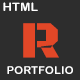
<style>
.page{position:relative;width:80px;height:80px;background:#2d2d2d}
.page>*{position:absolute;margin:0}
.t1{font:11.8px "ArialRoundedMTBold";letter-spacing:0.01em;color:#ffffff;scale:1.06 1}
.t2{font:52.4px "BlackOpsOne-Regular";letter-spacing:0.01em;color:#e24727;scale:1.06 1}
.t3{font:10.7px "ArialRoundedMTBold";letter-spacing:0.01em;color:#ffffff;scale:1.06 1}
</style>
<div class="page">
<p class="t1" style="left:3px;top:2px;width:35px;height:9px">HTML</p>
<p class="t2" style="left:23px;top:23px;width:36px;height:35px">R</p>
<p class="t3" style="left:7px;top:66px;width:66px;height:8px">PORTFOLIO</p>
</div>
